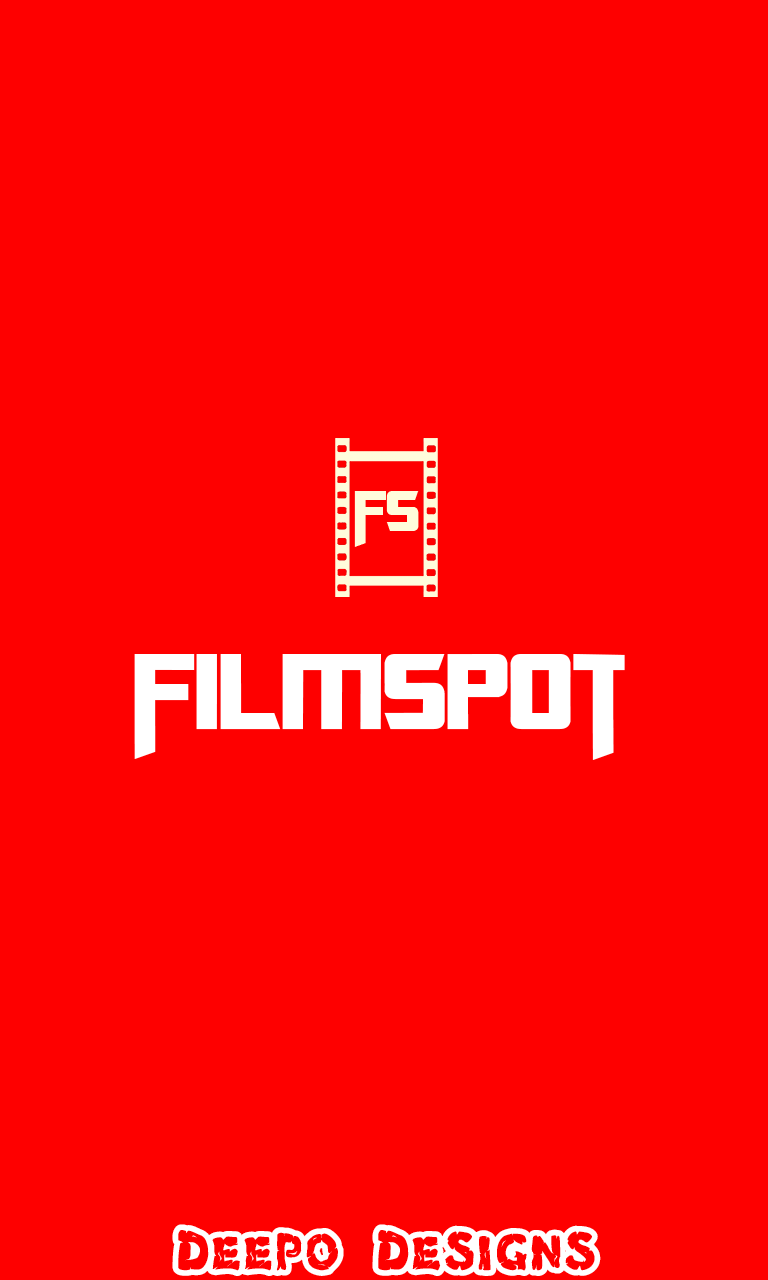
<style>
.page{position:relative;width:768px;height:1280px;background:#fe0000}
.page>*{position:absolute;margin:0}
.t1{font:120px "Transformers";color:#ffffff}
.t2{font:72px "Chlorinar-Regular";color:#ffffff}
</style>
<div class="page">
<p class="t1" style="left:134px;top:654px;width:491px;height:106px">filmspot</p>
<p class="t2" style="left:172px;top:1224px;width:429px;height:52px">Deepo Designs</p>
</div>
